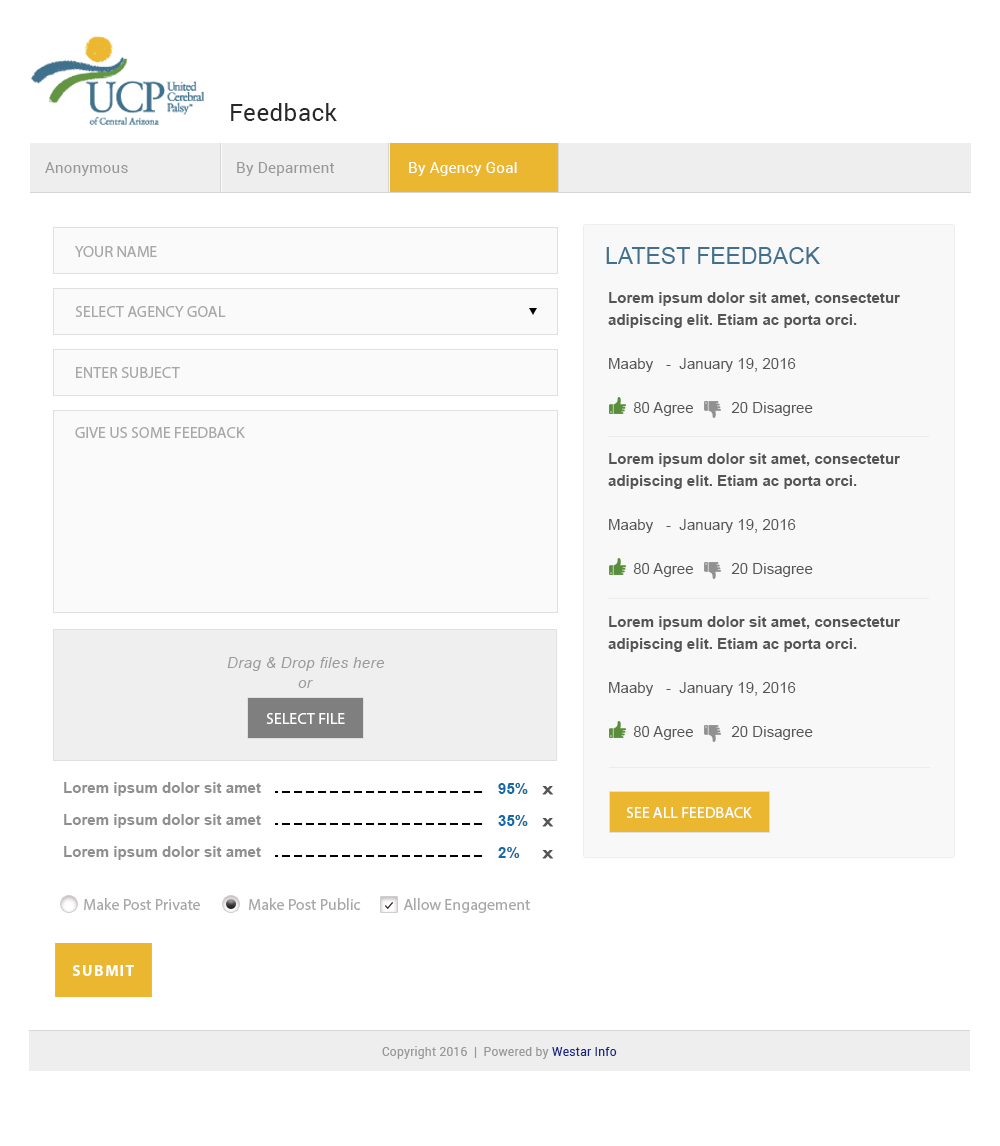
<style>
.page{position:relative;width:1000px;height:1146px;background:#ffffff}
.page>*{position:absolute;margin:0}
.t1{font:24px "Roboto-Regular";letter-spacing:0.02em;color:#282828}
.t2{font:15px "Roboto-Regular";letter-spacing:0.02em;color:#989898}
.t3{font:15px "Roboto-Regular";letter-spacing:0.02em;color:#ffffff}
.t4{font:16px "MyriadPro-Regular";color:#a8a8a8;text-transform:uppercase}
.t5{font:23px "ArialMT";color:#40708d}
.t6{font:15.1px/22px "Arial-BoldMT";color:#555555}
.t7{font:15.1px/22px "ArialMT";color:#555555}
.t8{font:16px "MyriadPro-Regular";color:#a8a8a8}
.t9{font:15.1px "Arial-ItalicMT";letter-spacing:0.025em;color:#9b9b9b}
.t10{font:16px "MyriadPro-Regular";color:#ffffff;text-transform:uppercase}
.t11{font:15.1px "Arial-BoldMT";color:#8e8e8e}
.t12{font:15.1px "Arial-BoldMT";color:#1369a6}
.t13{font:11.5px "Arial-BoldMT";color:#555555;font-weight:bold;scale:1.32 1}
.t14{font:16px "MyriadPro-Bold";letter-spacing:0.075em;color:#ffffff}
.t15{font:12px "Roboto-Regular";letter-spacing:0.02em;color:#989898}
.t16{font:12px "Roboto-Regular";letter-spacing:0.02em;color:#172788}
</style>
<div class="page">
<p class="t1" style="left:231px;top:103px;width:106px;height:18px">Feedback</p>
<p class="t2" style="left:45px;top:162px;width:83px;height:14px">Anonymous</p>
<p class="t2" style="left:237px;top:162px;width:98px;height:14px">By Deparment</p>
<p class="t3" style="left:409px;top:162px;width:108px;height:14px">By Agency Goal</p>
<p class="t4" style="left:75px;top:246px;width:82px;height:11px">your name</p>
<p class="t5" style="left:606px;top:247px;width:214px;height:17px">LATEST FEEDBACK</p>
<p class="t6" style="left:608px;top:292px;width:292px;height:124px">Lorem ipsum dolor sit amet, consectetur adipiscing elit. Etiam ac porta orci.<span class="t7"> <br><br>Maaby   -  January 19, 2016<br><br>      80 Agree         20 Disagree</span></p>
<p class="t4" style="left:75px;top:306px;width:151px;height:11px">select AGENCY GOAL</p>
<p class="t4" style="left:76px;top:367px;width:104px;height:11px">enter subject</p>
<p class="t8" style="left:75px;top:427px;width:170px;height:11px">GIVE US SOME FEEDBACK</p>
<p class="t6" style="left:608px;top:453px;width:292px;height:124px">Lorem ipsum dolor sit amet, consectetur adipiscing elit. Etiam ac porta orci.<span class="t7"> <br><br>Maaby   -  January 19, 2016        <br>      <br>      80 Agree         20 Disagree</span></p>
<p class="t6" style="left:608px;top:616px;width:292px;height:124px">Lorem ipsum dolor sit amet, consectetur adipiscing elit. Etiam ac porta orci.<span class="t7"> <br><br>Maaby   -  January 19, 2016        <br>      <br>      80 Agree         20 Disagree</span></p>
<p class="t9" style="left:227px;top:657px;width:157px;height:14px">Drag &amp; Drop files here</p>
<p class="t9" style="left:298px;top:680px;width:15px;height:8px">or</p>
<p class="t10" style="left:266px;top:713px;width:79px;height:11px">select file</p>
<p class="t11" style="left:64px;top:782px;width:197px;height:14px">Lorem ipsum dolor sit amet</p>
<p class="t12" style="left:498px;top:783px;width:30px;height:11px">95%</p>
<p class="t13" style="left:542px;top:786px;width:11px;height:9px">X</p>
<p class="t10" style="left:626px;top:807px;width:126px;height:11px">see all feedback</p>
<p class="t11" style="left:64px;top:814px;width:197px;height:14px">Lorem ipsum dolor sit amet</p>
<p class="t12" style="left:498px;top:815px;width:30px;height:11px">35%</p>
<p class="t13" style="left:542px;top:818px;width:11px;height:9px">X</p>
<p class="t11" style="left:64px;top:846px;width:197px;height:14px">Lorem ipsum dolor sit amet</p>
<p class="t12" style="left:498px;top:847px;width:22px;height:11px">2%</p>
<p class="t13" style="left:542px;top:850px;width:11px;height:9px">X</p>
<p class="t8" style="left:84px;top:898px;width:116px;height:12px">Make Post Private</p>
<p class="t8" style="left:249px;top:898px;width:112px;height:12px">Make Post Public</p>
<p class="t8" style="left:403px;top:898px;width:127px;height:15px">Allow Engagement</p>
<p class="t14" style="left:72px;top:965px;width:62px;height:11px">SUBMIT</p>
<p class="t15" style="left:382px;top:1046px;width:235px;height:13px">Copyright 2016  |  Powered by <span class="t16">Westar Info</span></p>
</div>
